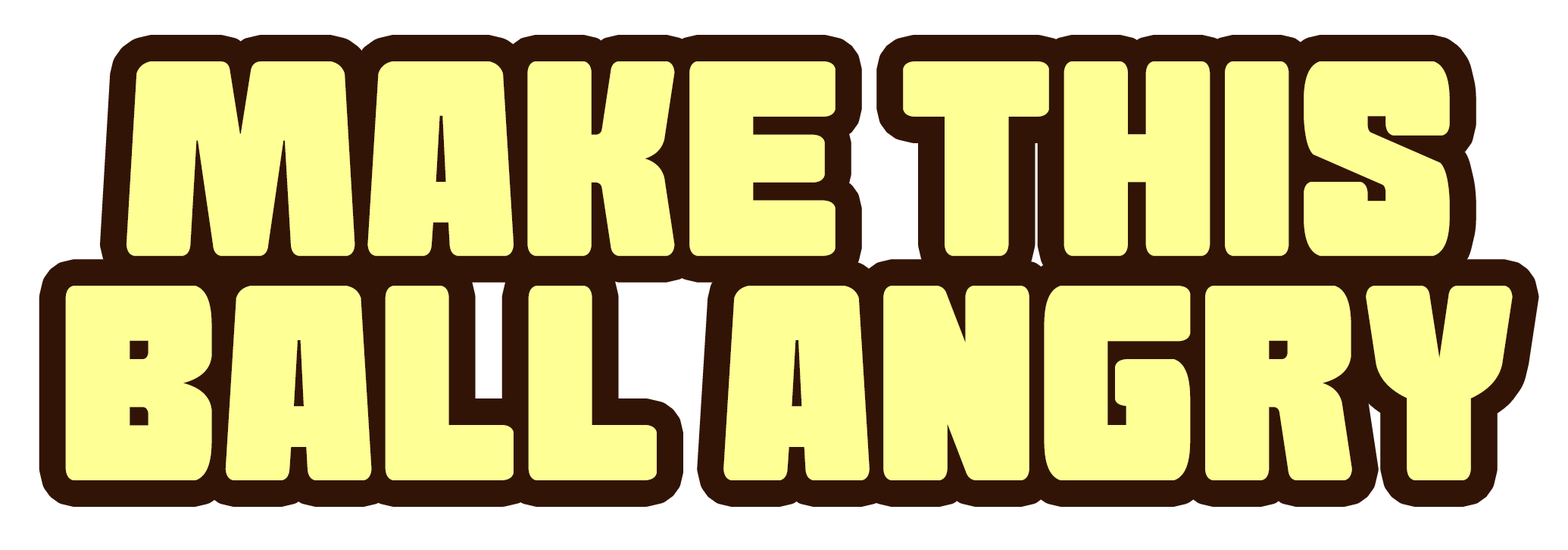
<style>
.page{position:relative;width:1568px;height:550px;background:#feff95}
.page>*{position:absolute;margin:0}
.t1{font:259px/224.4px "Goma-Block";color:#feff95}
</style>
<div class="page">
<p class="t1" style="left:65px;top:61px;width:1448px;height:419px;text-align:center">Make this<br>ball angry</p>
</div>
